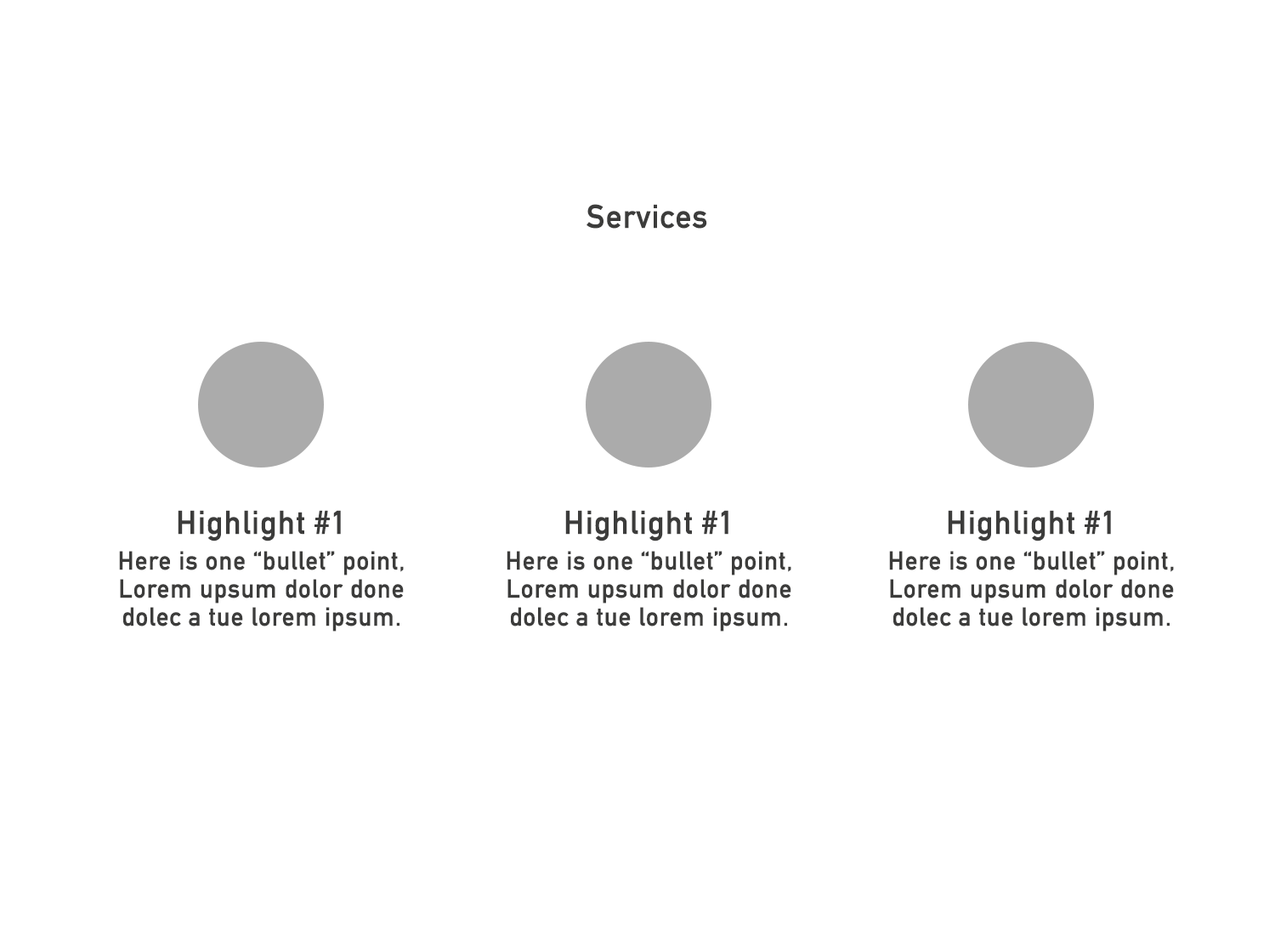
<style>
.page{position:relative;width:1275px;height:935px;background:#ffffff}
.page>*{position:absolute;margin:0}
.t1{font:32.3px "DINAlternate-Bold";color:#3c3c3b;font-weight:bold}
.t2{font:25.5px/28.1px "DINAlternate-Bold";color:#3c3c3b;font-weight:bold}
.t3{font:25.5px/35.7px "DINAlternate-Bold";color:#3c3c3b;font-weight:bold}
.t4{font:25.5px/30.6px "DINAlternate-Bold";color:#3c3c3b;font-weight:bold}
.t5{font:25.5px/25.5px "DINAlternate-Bold";color:#3c3c3b;font-weight:bold}
</style>
<div class="page">
<p class="t1" style="left:587px;top:204px;width:120px;height:25px">Services</p>
<p class="t2" style="left:119px;top:510px;width:285px;height:122px;text-align:center"><span class="t1">Highlight #1<br></span><span class="t3">Here is one “bullet” p</span><span class="t4">o</span><span class="t5">i</span>nt,<br>Lorem upsum dolor done<br>dolec a tue lorem ipsum.</p>
<p class="t2" style="left:507px;top:510px;width:284px;height:122px;text-align:center"><span class="t1">Highlight #1<br></span><span class="t3">Here is one “bullet” p</span><span class="t4">o</span><span class="t5">i</span>nt,<br>Lorem upsum dolor done<br>dolec a tue lorem ipsum.</p>
<p class="t2" style="left:889px;top:510px;width:285px;height:122px;text-align:center"><span class="t1">Highlight #1<br></span><span class="t3">Here is one “bullet” p</span><span class="t4">o</span><span class="t5">i</span>nt,<br>Lorem upsum dolor done<br>dolec a tue lorem ipsum.</p>
</div>
